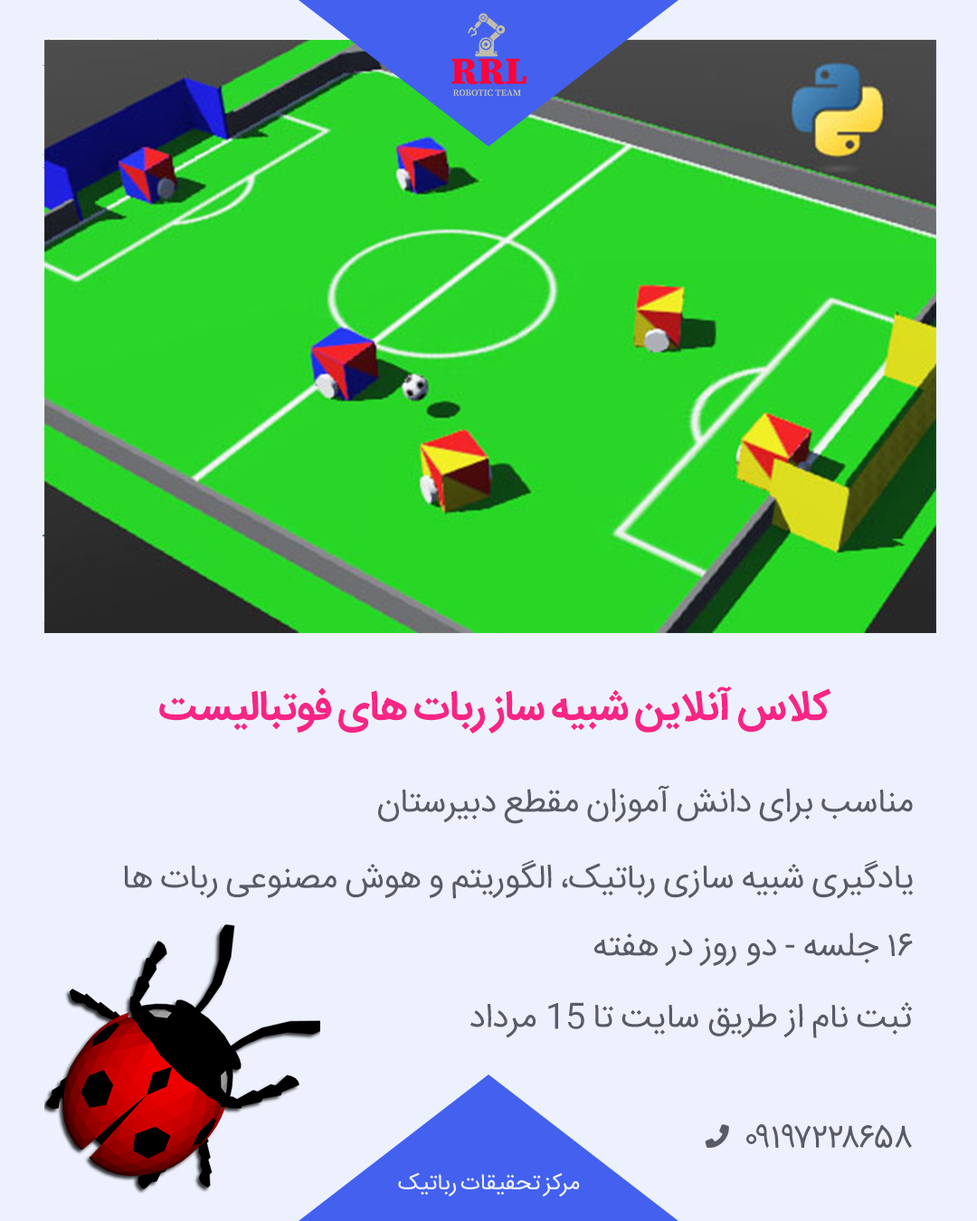
<style>
.page{position:relative;width:977px;height:1221px;background:#edf1fd}
.page>*{position:absolute;margin:0}
.t1{font:41.4px "IRANSans-Bold";letter-spacing:-0.02em;color:#f72585}
.t2{font:33.9px "IRANSans";letter-spacing:-0.02em;color:#595b66}
.t3{font:22.9px "IRANSans";letter-spacing:-0.02em;color:#edf1fd}
</style>
<div class="page">
<p class="t1" style="left:159px;top:685px;width:672px;height:48px">کلاس آنلاین شبیه ساز ربات های فوتبالیست</p>
<p class="t2" style="left:378px;top:785px;width:534px;height:39px">مناسب برای دانش آموزان مقطع دبیرستان</p>
<p class="t2" style="left:124px;top:859px;width:789px;height:40px">یادگیری شبیه سازی رباتیک، الگوریتم و هوش مصنوعی ربات ها</p>
<p class="t2" style="left:594px;top:932px;width:318px;height:35px">16 جلسه - دو روز در هفته</p>
<p class="t2" style="left:470px;top:1002px;width:442px;height:36px">ثبت نام از طریق سایت تا 15 مرداد</p>
<p class="t2" style="left:746px;top:1124px;width:166px;height:25px">09197228658</p>
<p class="t3" style="left:398px;top:1172px;width:182px;height:24px">مرکز تحقیقات رباتیک</p>
</div>
